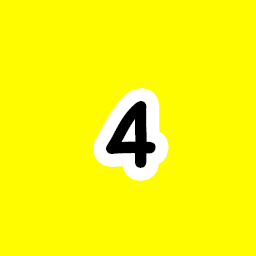
<style>
.page{position:relative;width:256px;height:256px;background:#fffc00}
.page>*{position:absolute;margin:0}
.t1{font:90px "ComicHelvetic-Medium";color:#000000}
</style>
<div class="page">
<p class="t1" style="left:106px;top:101px;width:50px;height:67px">4</p>
</div>
